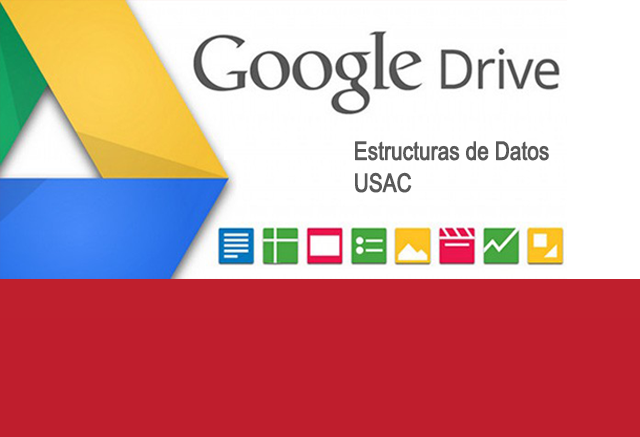
<style>
.page{position:relative;width:640px;height:437px;background:#bf1e2d}
.page>*{position:absolute;margin:0}
.t1{font:25.4px/16px "ArialMT";letter-spacing:-0.02em;color:#595959;font-weight:bold;scale:0.81 1}
</style>
<div class="page">
<p class="t1" style="left:355px;top:141px;width:194px;height:52px">Estructuras de Datos<br><br>USAC</p>
</div>
